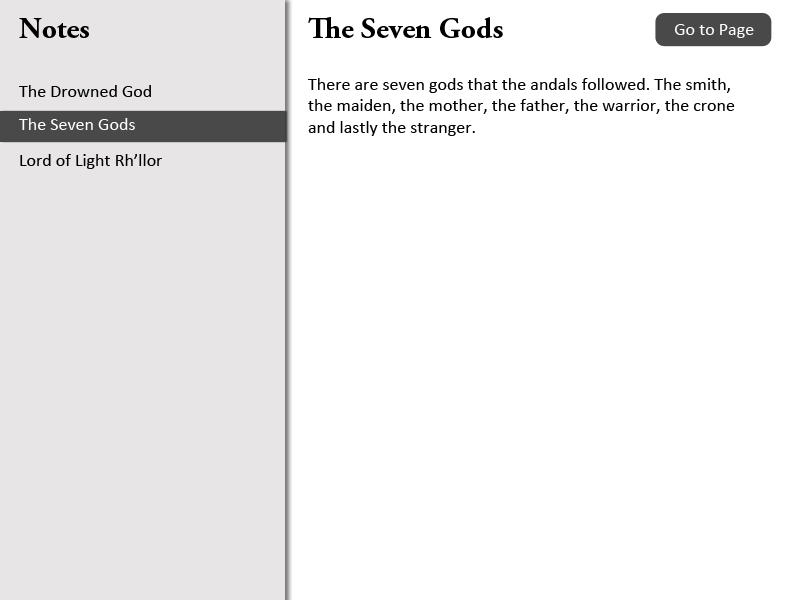
<style>
.page{position:relative;width:800px;height:600px;background:#ffffff}
.page>*{position:absolute;margin:0}
.t1{font:30px "AGaramondPro-Bold";color:#000000}
.t2{font:18px "Calibri";color:#ffffff}
.t3{font:18px "Calibri";color:#000000}
</style>
<div class="page">
<p class="t1" style="left:308px;top:17px;width:195px;height:22px">The Seven Gods</p>
<p class="t1" style="left:19px;top:18px;width:70px;height:20px">Notes</p>
<p class="t2" style="left:674px;top:24px;width:80px;height:14px">Go to Page</p>
<p class="t3" style="left:308px;top:78px;width:427px;height:58px">There are seven gods that the andals followed. The smith, the maiden, the mother, the father, the warrior, the crone and lastly the stranger.</p>
<p class="t3" style="left:19px;top:85px;width:132px;height:12px">The Drowned God</p>
<p class="t2" style="left:19px;top:118px;width:116px;height:12px">The Seven Gods</p>
<p class="t3" style="left:20px;top:154px;width:142px;height:15px">Lord of Light Rh’llor</p>
</div>
